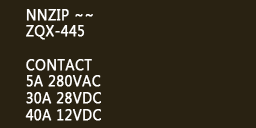
<style>
.page{position:relative;width:256px;height:128px;background:#292212}
.page>*{position:absolute;margin:0}
.t1{font:15.7px/16.7px "SegoeUI";letter-spacing:0.02em;color:#ffffff;font-weight:bold;scale:0.89 1}
</style>
<div class="page">
<p class="t1" style="left:25px;top:9px;width:76px;height:112px">NNZIP ~~<br>ZQX-445<br><br>CONTACT<br>5A 280VAC<br>30A 28VDC<br>40A 12VDC</p>
</div>
